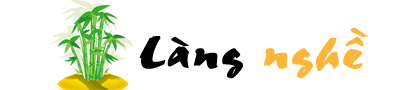
<style>
.page{position:relative;width:397px;height:90px;background:#ffffff}
.page>*{position:absolute;margin:0}
.t1{font:48px "UVNThangVu";color:#030303;font-weight:bold;scale:1.26 1}
.t2{font:48px "UVNThangVu";color:#ffb638;font-weight:bold;scale:1.26 1}
</style>
<div class="page">
<p class="t1" style="left:139px;top:27px;width:229px;height:52px">Làng <span class="t2">nghề</span></p>
</div>
